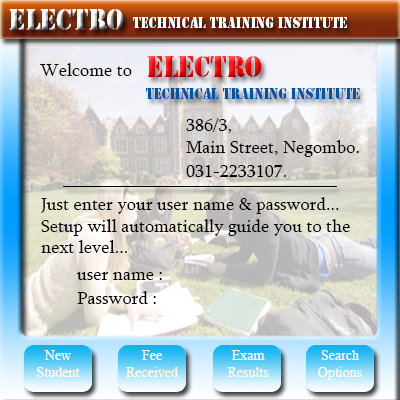
<style>
.page{position:relative;width:400px;height:400px}
.page>*{position:absolute;margin:0}
.t1{font:26.9px "StencilStd";scale:0.91 1}
.t2{font:13.4px "StencilStd";color:#ffffff;scale:0.91 1}
.t3{font:18px "Sylfaen";color:#000000}
.t4{font:13.4px "StencilStd";color:#0054a6;scale:0.91 1}
.t5{font:18px/12px "Sylfaen";color:#000000}
.t6{font:14px "TimesNewRomanPSMT";color:#ffffff}
</style>
<div class="page">
<p class="t1" style="left:9px;top:9px;width:115px;height:21px">Electro</p>
<p class="t2" style="left:133px;top:17px;width:214px;height:11px">Technical Training Institute</p>
<p class="t3" style="left:40px;top:63px;width:92px;height:13px">Welcome to</p>
<p class="t1" style="left:147px;top:56px;width:115px;height:21px">Electro</p>
<p class="t4" style="left:146px;top:88px;width:214px;height:11px">Technical Training Institute</p>
<p class="t3" style="left:186px;top:118px;width:173px;height:39px">386/3,<br>Main Street, Negombo.</p>
<p class="t3" style="left:186px;top:165px;width:100px;height:12px">031-2233107.</p>
<p class="t3" style="left:41px;top:197px;width:309px;height:56px">Just enter your user name &amp; password...<br>Setup will automatically guide you to the<br>next level...</p>
<p class="t5" style="left:76px;top:272px;width:86px;height:32px">user name :<br><br>Password :</p>
<p class="t6" style="left:37px;top:350px;width:43px;height:27px;text-align:center">New<br>Student</p>
<p class="t6" style="left:126px;top:350px;width:53px;height:27px;text-align:center">Fee<br>Received</p>
<p class="t6" style="left:227px;top:350px;width:42px;height:27px;text-align:center">Exam<br>Results</p>
<p class="t6" style="left:318px;top:350px;width:44px;height:30px;text-align:center">Search<br>Options</p>
</div>
